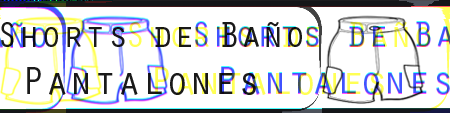
<style>
.page{position:relative;width:450px;height:113px;background:#ffffff}
.page>*{position:absolute;margin:0}
.t1{font:37px "OratorStd"}
.t2{font:40px "OratorStd"}
</style>
<div class="page">
<p class="t1" style="left:129px;top:21px;width:301px;height:73px">Shorts de Baño<br><span class="t2">  Pantalones</span></p>
</div>
